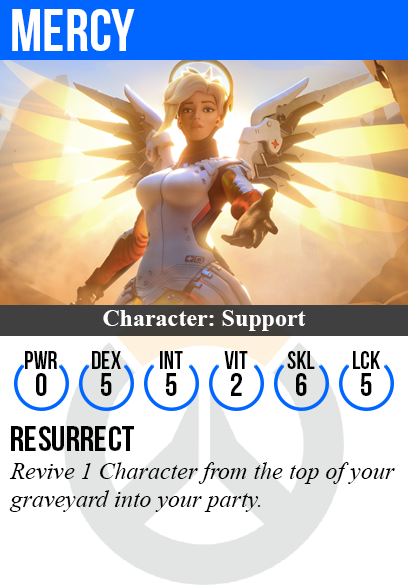
<style>
.page{position:relative;width:408px;height:585px;background:#ffffff}
.page>*{position:absolute;margin:0}
.t1{font:60px "BebasNeue";color:#ffffff}
.t2{font:24px "TimesNewRomanPS-BoldMT";color:#ffffff}
.t3{font:25px "BebasNeue";color:#000000}
.t4{font:32px "BebasNeue";color:#000000}
.t5{font:36px "BebasNeue";color:#000000}
.t6{font:24px "TimesNewRomanPS-ItalicMT";color:#000000}
</style>
<div class="page">
<p class="t1" style="left:12px;top:9px;width:123px;height:42px">mercy</p>
<p class="t2" style="left:103px;top:310px;width:203px;height:21px">Character: Support</p>
<p class="t3" style="left:25px;top:351px;width:32px;height:18px">PWR</p>
<p class="t3" style="left:92px;top:351px;width:29px;height:18px">dex</p>
<p class="t3" style="left:160px;top:351px;width:23px;height:18px">int</p>
<p class="t3" style="left:224px;top:351px;width:24px;height:18px">vit</p>
<p class="t3" style="left:287px;top:351px;width:28px;height:18px">skl</p>
<p class="t3" style="left:353px;top:351px;width:27px;height:18px">lck</p>
<p class="t4" style="left:36px;top:373px;width:11px;height:23px">0</p>
<p class="t4" style="left:101px;top:373px;width:11px;height:23px">5</p>
<p class="t4" style="left:166px;top:373px;width:11px;height:23px">5</p>
<p class="t4" style="left:231px;top:373px;width:11px;height:23px">2</p>
<p class="t4" style="left:296px;top:373px;width:11px;height:23px">6</p>
<p class="t4" style="left:361px;top:373px;width:11px;height:23px">5</p>
<p class="t5" style="left:11px;top:426px;width:123px;height:25px">resurrect</p>
<p class="t6" style="left:9px;top:462px;width:386px;height:50px">Revive 1 Character from the top of your<br>graveyard into your party.</p>
</div>
